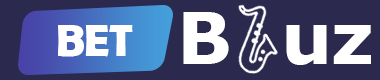
<style>
.page{position:relative;width:380px;height:80px;background:#2b294e}
.page>*{position:absolute;margin:0}
.t1{font:71.4px "Verdana-Bold";color:#ffffff}
.t2{font:44.6px "BerlinSansFBDemi-Bold";color:#ffffff}
</style>
<div class="page">
<p class="t1" style="left:183px;top:12px;width:188px;height:53px">B  uz</p>
<p class="t2" style="left:58px;top:25px;width:75px;height:32px">BET</p>
</div>
